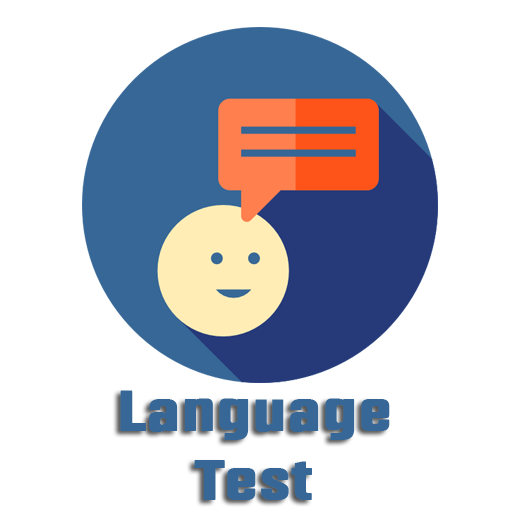
<style>
.page{position:relative;width:512px;height:512px;background:#ffffff}
.page>*{position:absolute;margin:0}
.t1{font:57.1px "Fragua-Bold";color:#366796;font-weight:bold;scale:1.17 1}
</style>
<div class="page">
<p class="t1" style="left:120px;top:390px;width:270px;height:110px;text-align:center">Language<br>Test</p>
</div>
